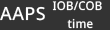
<style>
.page{position:relative;width:110px;height:30px;background:#333333}
.page>*{position:absolute;margin:0}
.t1{font:18px "NotoSans-Medium";letter-spacing:0.02em;color:#ffffff}
.t2{font:12px "NotoSans-Medium";letter-spacing:0.02em;color:#ffffff;scale:0.95 1}
</style>
<div class="page">
<p class="t1" style="left:0px;top:6px;width:45px;height:15px">AAPS</p>
<p class="t2" style="left:52px;top:1px;width:50px;height:10px">IOB/COB</p>
<p class="t2" style="left:67px;top:18px;width:26px;height:11px">time</p>
</div>
